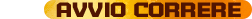
<style>
.page{position:relative;width:252px;height:19px;background:#501401}
.page>*{position:absolute;margin:0}
.t1{font:25px "MTV2C";color:#501401;text-transform:uppercase;scale:1.2 1}
</style>
<div class="page">
<p class="t1" style="left:56px;top:2px;width:185px;height:15px">AVVIO CORRERE</p>
</div>
